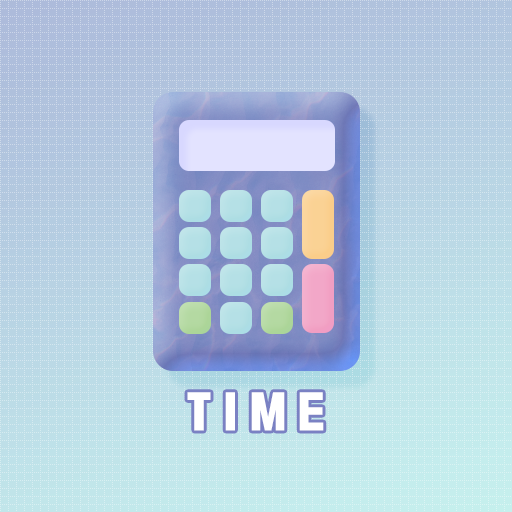
<style>
.page{position:relative;width:512px;height:512px}
.page>*{position:absolute;margin:0}
.t1{font:42.4px "SDGdGothic";letter-spacing:0.3em;color:#ffffff}
</style>
<div class="page">
<p class="t1" style="left:187px;top:392px;width:137px;height:39px">TIME</p>
</div>
